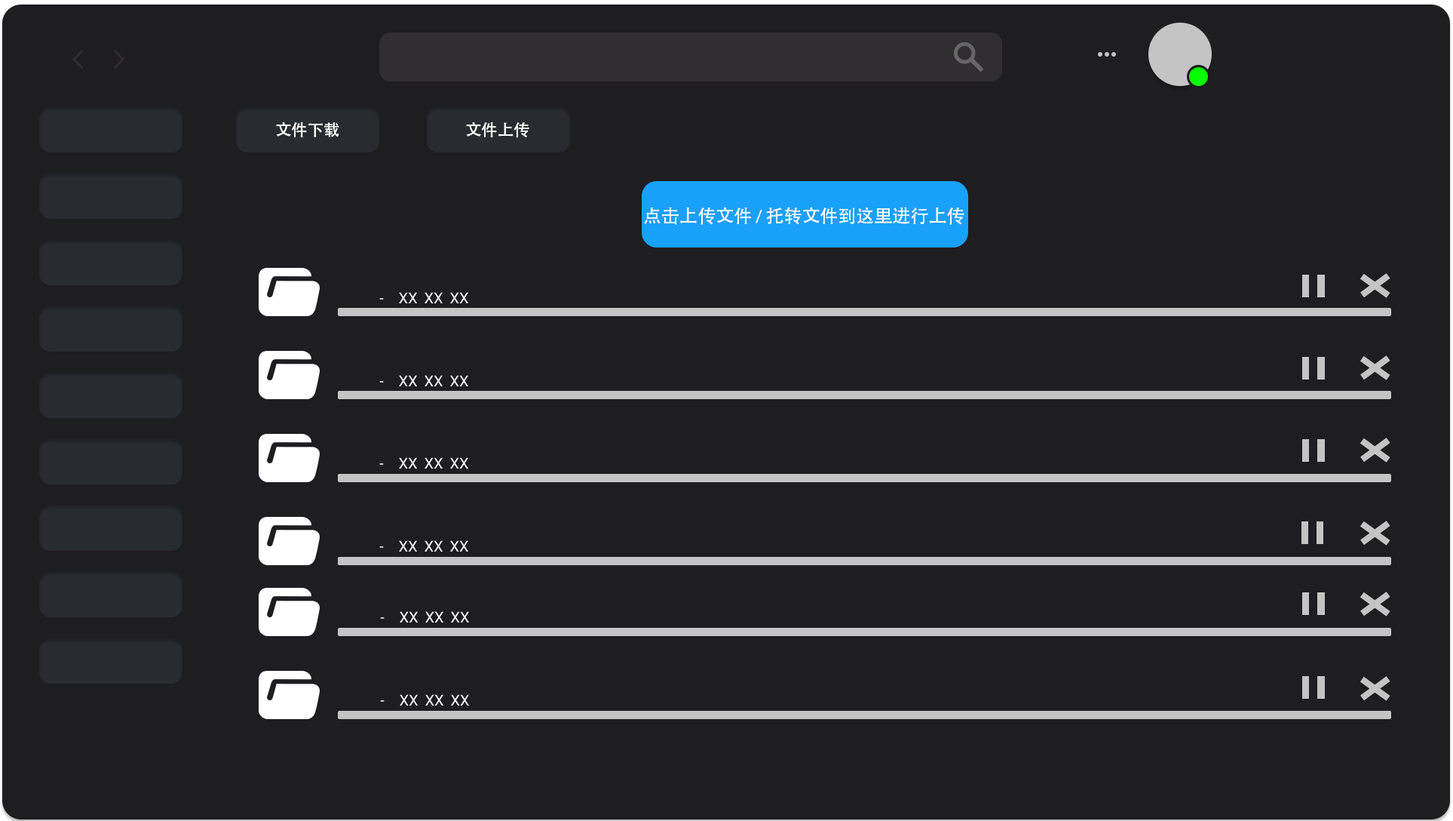
<style>
.page{position:relative;width:1453px;height:821px;background:#1e1d1f}
.page>*{position:absolute;margin:0}
.t1{font:16.1px "AdobeHeitiStd-Regular";color:#ffffff}
.t2{font:18.1px "AdobeHeitiStd-Regular";color:#ffffff}
.t3{font:18.1px "MyriadPro-Regular";color:#ffffff}
.t4{font:15.1px "Roboto-Regular";color:#ffffff}
</style>
<div class="page">
<p class="t1" style="left:276px;top:122px;width:63px;height:15px">文件下载</p>
<p class="t1" style="left:466px;top:122px;width:63px;height:16px">文件上传</p>
<p class="t2" style="left:644px;top:207px;width:321px;height:18px">点击上传文件<span class="t3"> / </span>托转文件到这里进行上传</p>
<p class="t4" style="left:379px;top:292px;width:90px;height:11px">剩余时间    -    XX：XX：XX</p>
<p class="t4" style="left:379px;top:375px;width:90px;height:11px">剩余时间    -    XX：XX：XX</p>
<p class="t4" style="left:379px;top:457px;width:90px;height:11px">剩余时间    -    XX：XX：XX</p>
<p class="t4" style="left:379px;top:540px;width:90px;height:11px">剩余时间    -    XX：XX：XX</p>
<p class="t4" style="left:380px;top:611px;width:89px;height:11px">剩余时间    -    XX：XX：XX</p>
<p class="t4" style="left:380px;top:694px;width:89px;height:11px">剩余时间    -    XX：XX：XX</p>
</div>
